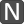
<style>
.page{position:relative;width:24px;height:24px;background:#4d4d4d}
.page>*{position:absolute;margin:0}
.t1{font:26.7px "Calibri";color:#ffffff;scale:1.04 1}
</style>
<div class="page">
<p class="t1" style="left:5px;top:3px;width:14px;height:17px">N</p>
</div>
